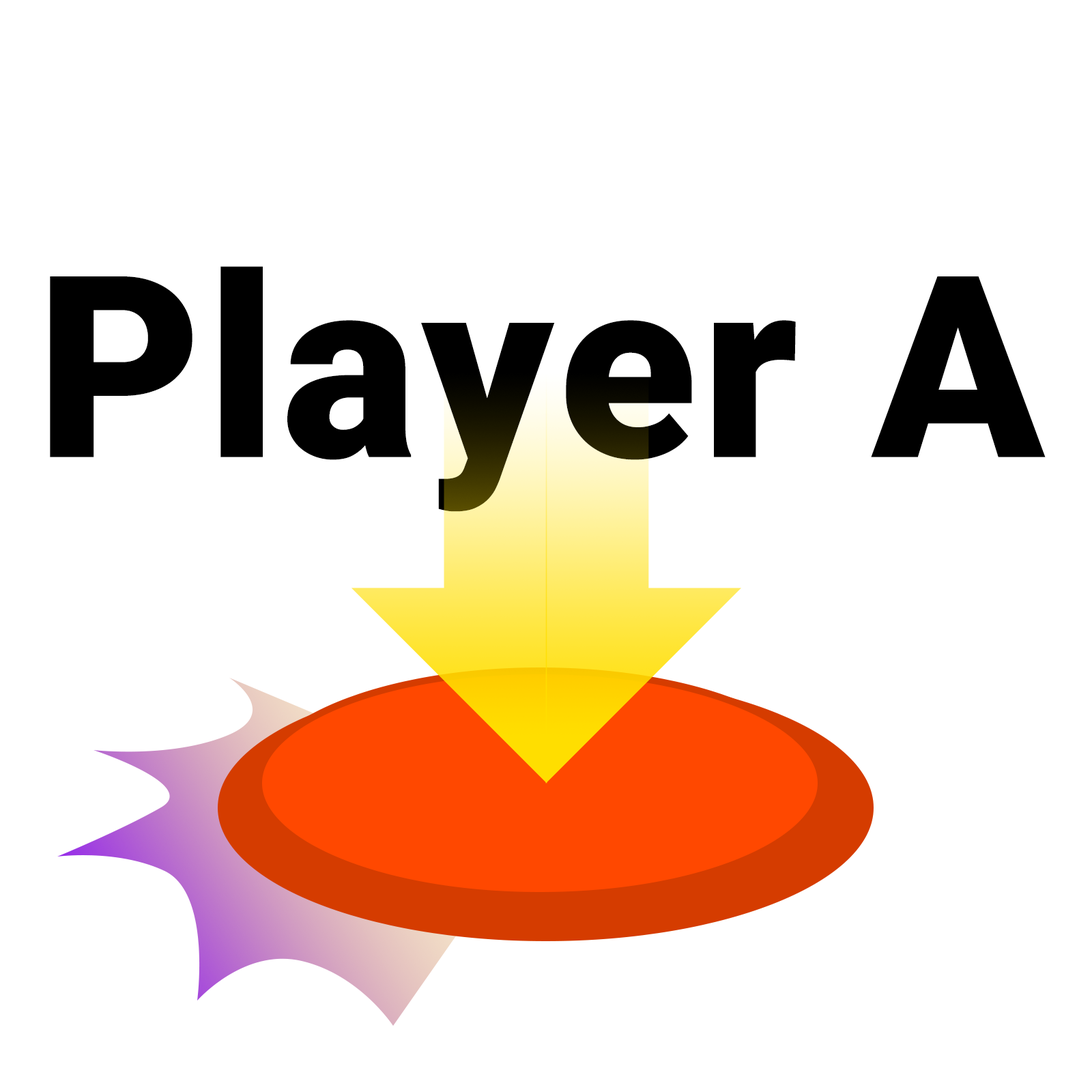
<style>
.page{position:relative;width:1092px;height:1092px;background:#ffffff}
.page>*{position:absolute;margin:0}
.t1{font:254.1px "Roboto-Black";letter-spacing:0.02em;color:#000000}
</style>
<div class="page">
<p class="t1" style="left:50px;top:266px;width:996px;height:246px">Player A</p>
</div>
